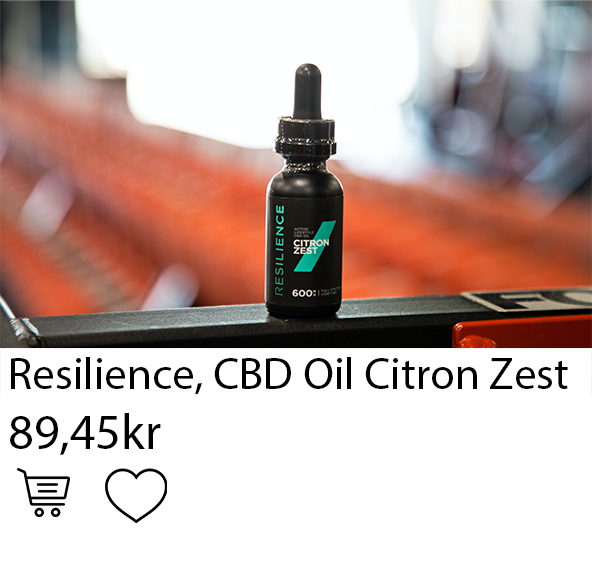
<style>
.page{position:relative;width:592px;height:567px;background:#ffffff}
.page>*{position:absolute;margin:0}
.t1{font:45px "MyriadPro-Regular";color:#000000}
.t2{font:50px "MyriadPro-Regular";color:#000000}
</style>
<div class="page">
<p class="t1" style="left:10px;top:357px;width:558px;height:98px">Resilience, CBD Oil Citron Zest<br><span class="t2">89,45kr<br>128,45kr</span></p>
</div>
